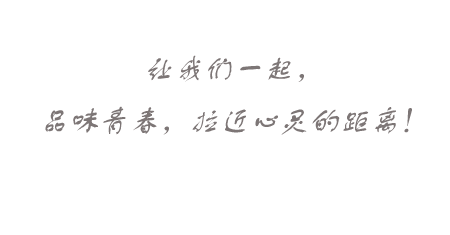
<style>
.page{position:relative;width:450px;height:235px;background:#ffffff}
.page>*{position:absolute;margin:0}
.t1{font:30px "FZSTK--GBK1-0";color:#7d7676;font-style:italic}
</style>
<div class="page">
<p class="t1" style="left:45px;top:55px;width:367px;height:80px;text-align:center">让我们一起，<br>品味青春，拉近心灵的距离！</p>
</div>
